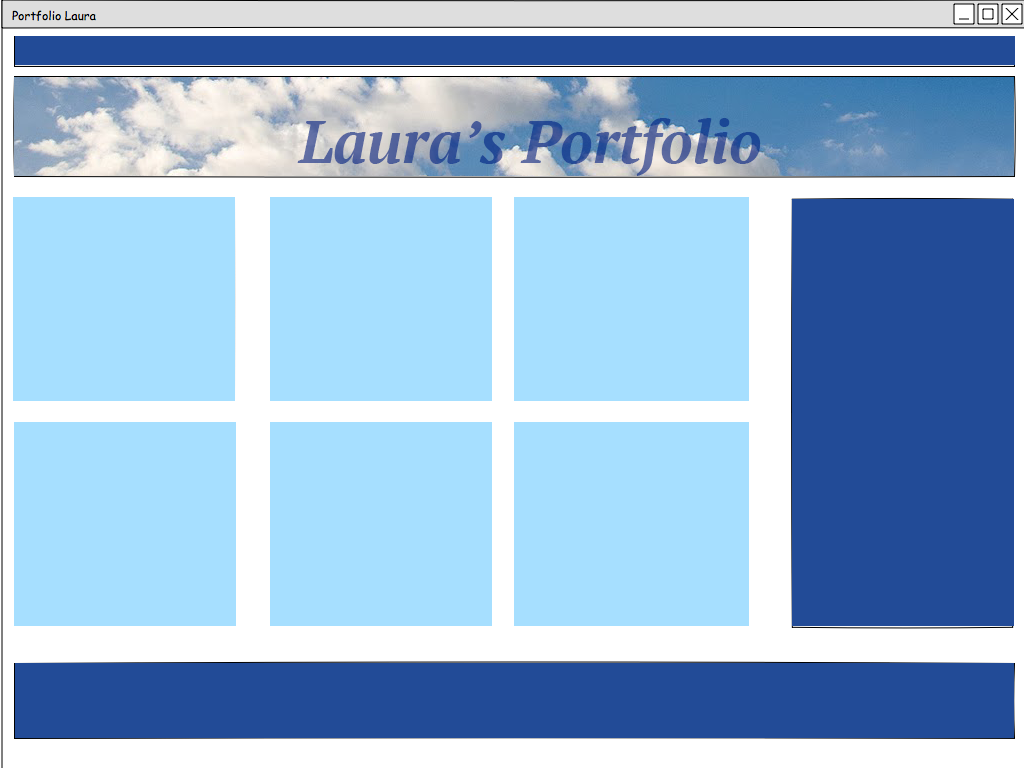
<style>
.page{position:relative;width:1024px;height:768px;background:#a6dfff}
.page>*{position:absolute;margin:0}
.t1{font:60px "PTSerif-BoldItalic"}
</style>
<div class="page">
<p class="t1" style="left:297px;top:118px;width:464px;height:58px">Laura’s Portfolio</p>
</div>
